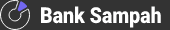
<style>
.page{position:relative;width:170px;height:30px;background:#333333}
.page>*{position:absolute;margin:0}
.t1{font:22px "Roboto-Black";color:#ffffff;scale:0.89 1}
</style>
<div class="page">
<p class="t1" style="left:41px;top:6px;width:120px;height:22px">Bank Sampah</p>
</div>
